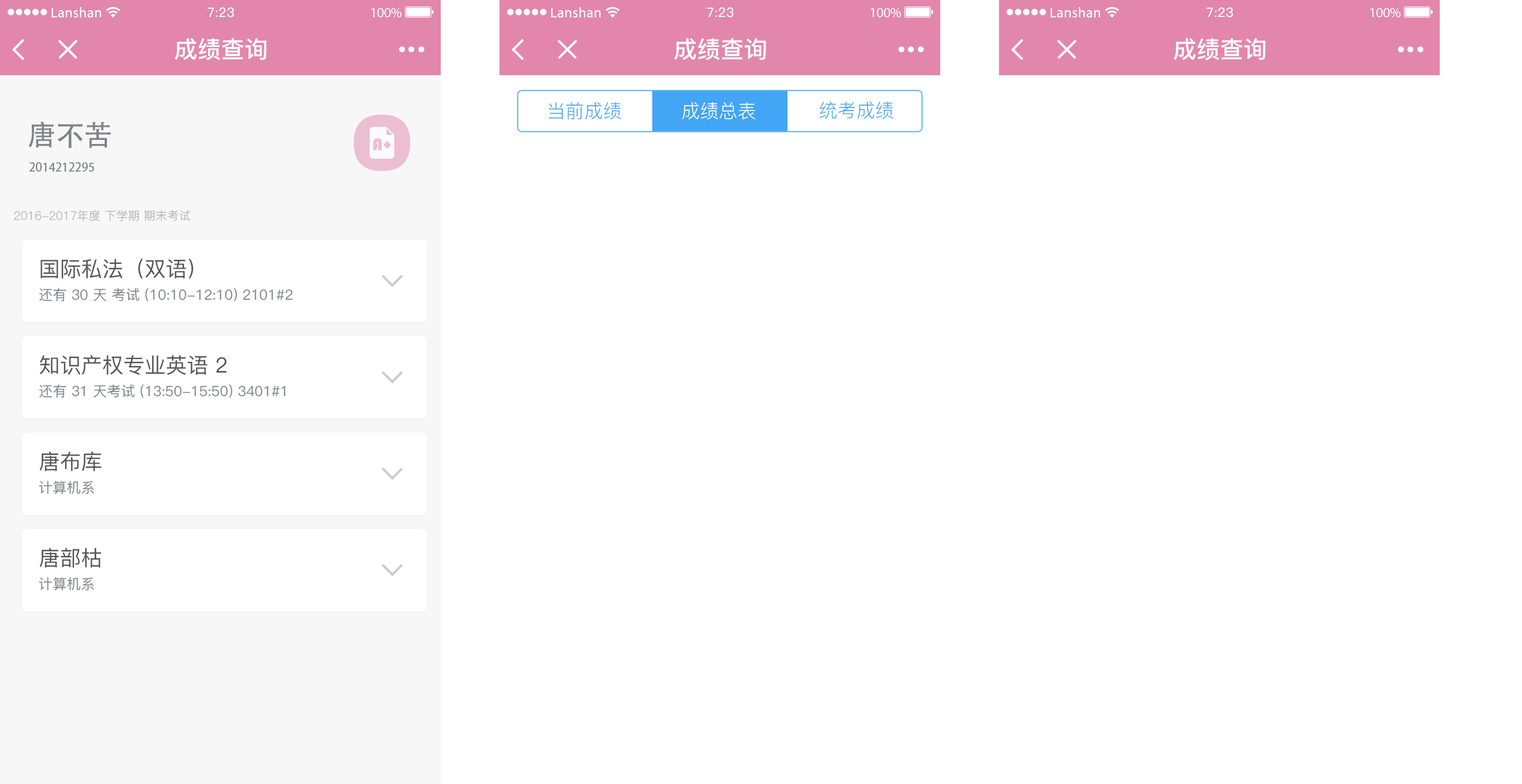
<style>
.page{position:relative;width:1522px;height:784px;background:#ffffff}
.page>*{position:absolute;margin:0}
.t1{font:18.8px "PingFang-SC-Regular";color:#42a5f5}
.t2{font:18.8px "PingFang-SC-Regular";color:#ffffff}
.t3{font:28.2px "AdobeHeitiStd-Regular";color:#7f848a}
.t4{font:11.7px "AdobeHeitiStd-Regular";color:#7f848a}
.t5{font:11.7px "PingFang-SC-Regular";color:#b2b2b2}
.t6{font:21.1px "PingFang-SC-Medium";color:#545454}
.t7{font:14.1px "PingFang-SC-Medium";color:#7f848a}
</style>
<div class="page">
<p class="t1" style="left:548px;top:102px;width:73px;height:18px">当前成绩</p>
<p class="t2" style="left:681px;top:102px;width:74px;height:18px">成绩总表</p>
<p class="t1" style="left:820px;top:101px;width:73px;height:18px">统考成绩</p>
<p class="t3" style="left:28px;top:122px;width:83px;height:26px">唐不苦</p>
<p class="t4" style="left:29px;top:162px;width:65px;height:10px">2014212295</p>
<p class="t5" style="left:14px;top:210px;width:176px;height:11px">2016-2017年度 下学期 期末考试</p>
<p class="t6" style="left:41px;top:258px;width:152px;height:20px">国际私法（双语）</p>
<p class="t7" style="left:39px;top:288px;width:254px;height:13px">还有 30 天 考试 (10:10-12:10) 2101#2</p>
<p class="t6" style="left:39px;top:355px;width:188px;height:20px">知识产权专业英语 2</p>
<p class="t7" style="left:39px;top:384px;width:247px;height:14px">还有 31 天考试 (13:50-15:50) 3401#1</p>
<p class="t6" style="left:39px;top:451px;width:63px;height:20px">唐布库</p>
<p class="t7" style="left:39px;top:481px;width:55px;height:13px">计算机系</p>
<p class="t6" style="left:39px;top:548px;width:62px;height:20px">唐部枯</p>
<p class="t7" style="left:39px;top:577px;width:55px;height:13px">计算机系</p>
</div>
